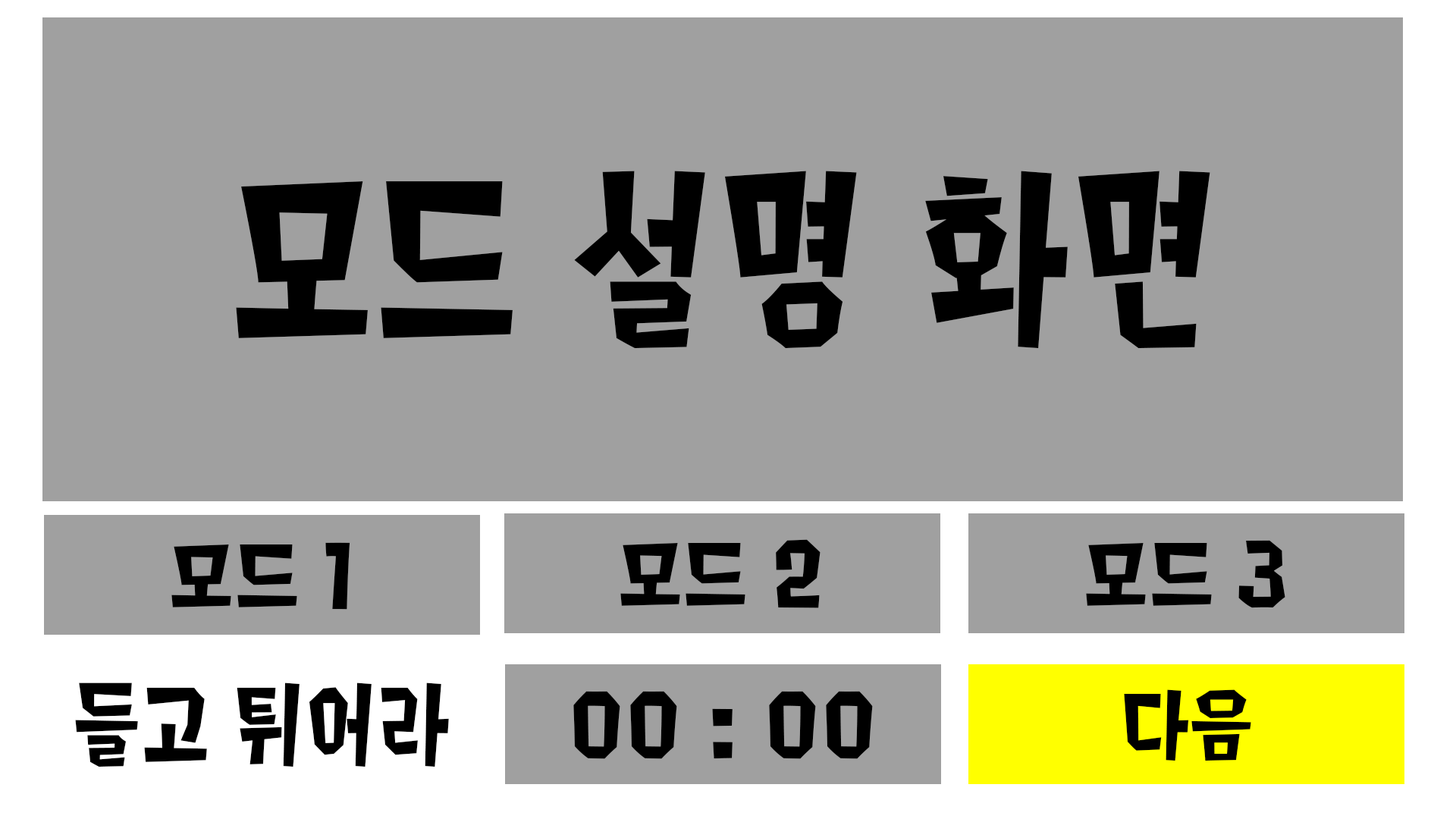
<style>
.page{position:relative;width:1456px;height:819px;background:#a0a0a0}
.page>*{position:absolute;margin:0}
.t1{font:227.5px "Splat2K";letter-spacing:0.01em;color:#000000}
.t2{font:91px "Splat2K";letter-spacing:0.01em;color:#000000;scale:1.13 1}
.t3{font:107.6px "Splat2K";letter-spacing:0.01em;color:#000000}
</style>
<div class="page">
<p class="t1" style="left:236px;top:171px;width:974px;height:177px">모드 설명 화면</p>
<p class="t2" style="left:171px;top:542px;width:179px;height:68px">모드 1</p>
<p class="t2" style="left:620px;top:539px;width:201px;height:69px">모드 2</p>
<p class="t2" style="left:1086px;top:540px;width:199px;height:68px">모드 3</p>
<p class="t3" style="left:75px;top:682px;width:374px;height:85px">들고 튀어라</p>
<p class="t2" style="left:1124px;top:689px;width:127px;height:72px">다음</p>
<p class="t2" style="left:573px;top:691px;width:300px;height:68px">00 : 00</p>
</div>
